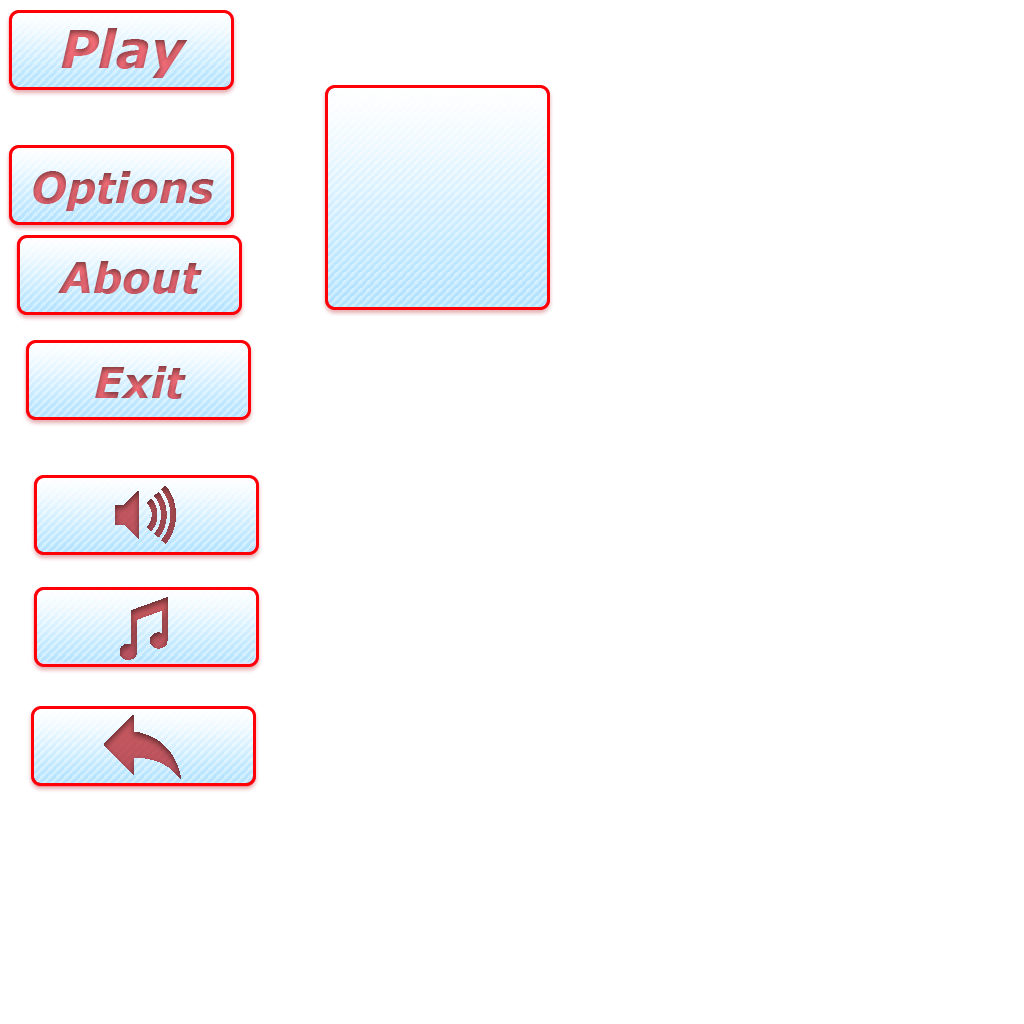
<style>
.page{position:relative;width:1024px;height:1024px;background:#ffffff}
.page>*{position:absolute;margin:0}
.t1{font:52px "Verdana-BoldItalic"}
.t2{font:42px "Verdana-BoldItalic";color:#c85963}
.t3{font:42px "Verdana-BoldItalic";color:#cc5b65}
.t4{font:42px "Verdana-BoldItalic"}
</style>
<div class="page">
<p class="t1" style="left:61px;top:28px;width:127px;height:50px">Play</p>
<p class="t2" style="left:33px;top:171px;width:181px;height:40px">Options</p>
<p class="t3" style="left:58px;top:261px;width:144px;height:33px">About</p>
<p class="t4" style="left:95px;top:366px;width:91px;height:33px">Exit</p>
</div>
